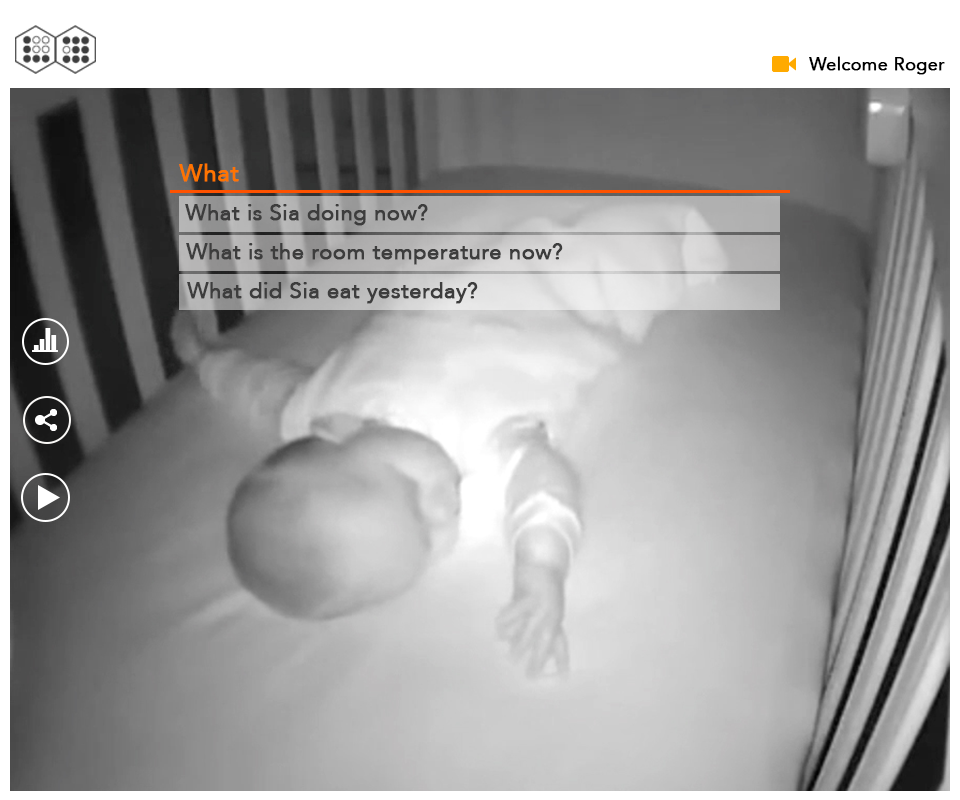
<style>
.page{position:relative;width:960px;height:800px}
.page>*{position:absolute;margin:0}
.t1{font:18px "Avenir-Roman";color:#000000;font-weight:bold}
.t2{font:24px "Avenir-Roman";color:#ff7400;font-weight:bold}
.t3{font:22px "Avenir-Roman";color:#3d3d3d;font-weight:bold}
</style>
<div class="page">
<p class="t1" style="left:809px;top:56px;width:136px;height:19px">Welcome Roger</p>
<p class="t2" style="left:179px;top:163px;width:60px;height:19px">What</p>
<p class="t3" style="left:185px;top:204px;width:243px;height:22px">What is Sia doing now?</p>
<p class="t3" style="left:186px;top:243px;width:377px;height:22px">What is the room temperature now?</p>
<p class="t3" style="left:187px;top:282px;width:291px;height:22px">What did Sia eat yesterday?</p>
</div>
